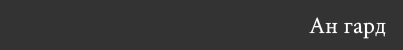
<style>
.page{position:relative;width:403px;height:50px;background:#333333}
.page>*{position:absolute;margin:0}
.t1{font:24px "CrimsonText-Regular";color:#ffffff}
</style>
<div class="page">
<p class="t1" style="left:309px;top:17px;width:77px;height:22px">Ан гард</p>
</div>
